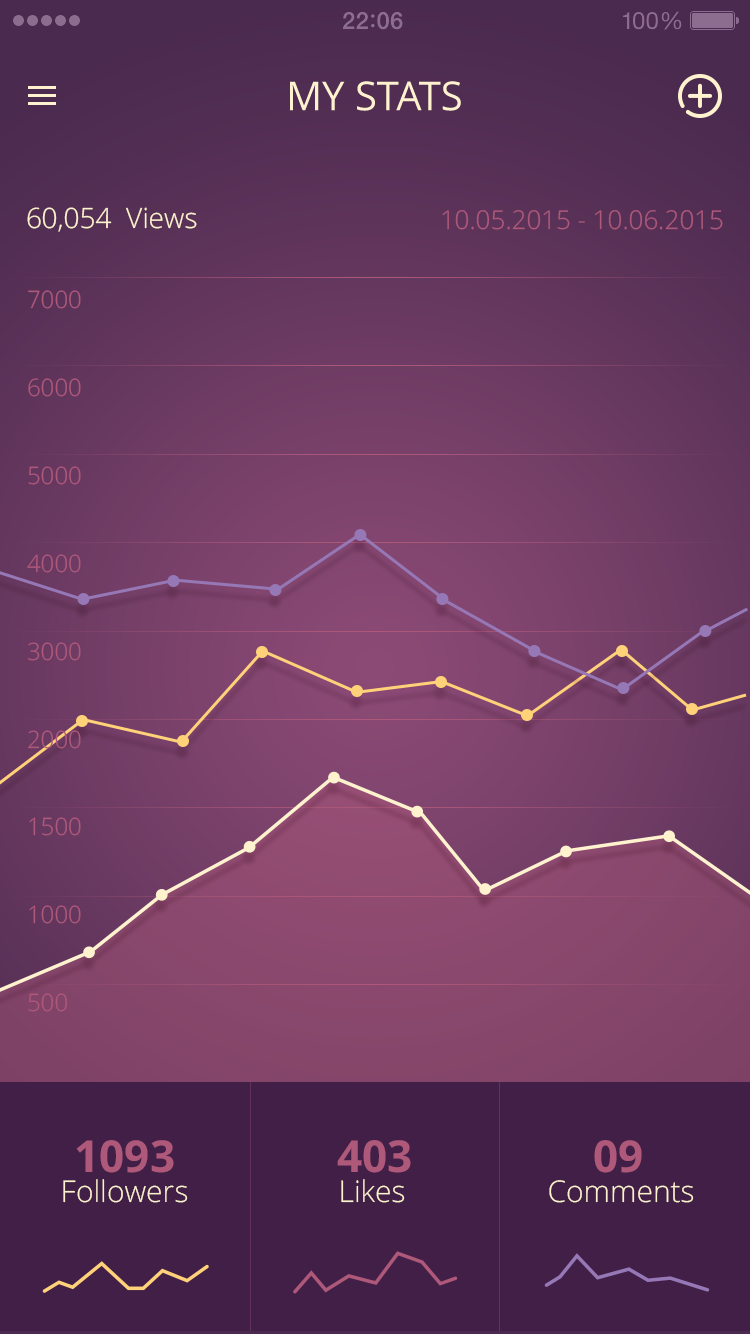
<style>
.page{position:relative;width:750px;height:1334px}
.page>*{position:absolute;margin:0}
.t1{font:40px "OpenSans";color:#fff3cf;text-transform:uppercase}
.t2{font:28px "OpenSans-Light";color:#fff3cf}
.t3{font:26px "OpenSans-Light";color:#ae587a}
.t4{font:24px/88px "OpenSans-Light";color:#ae587a}
.t5{font:30px/30.5px "OpenSans-Light";color:#fef2cf}
.t6{font:44px/30.5px "OpenSans-Bold";color:#ae587a}
</style>
<div class="page">
<p class="t1" style="left:290px;top:81px;width:171px;height:30px">My Stats</p>
<p class="t2" style="left:27px;top:207px;width:170px;height:25px">60,054  Views</p>
<p class="t3" style="left:442px;top:210px;width:281px;height:20px">10.05.2015 - 10.06.2015</p>
<p class="t4" style="left:27px;top:290px;width:54px;height:722px">7000<br>6000<br>5000<br>4000<br>3000<br>2000<br>1500<br>1000<br>500</p>
<p class="t5" style="left:63px;top:1140px;width:125px;height:63px;text-align:center"><span class="t6">1093<br></span>Followers</p>
<p class="t5" style="left:337px;top:1140px;width:74px;height:63px;text-align:center"><span class="t6">403<br></span>Likes</p>
<p class="t5" style="left:549px;top:1140px;width:145px;height:63px;text-align:center"><span class="t6">09<br> </span>Comments</p>
</div>
